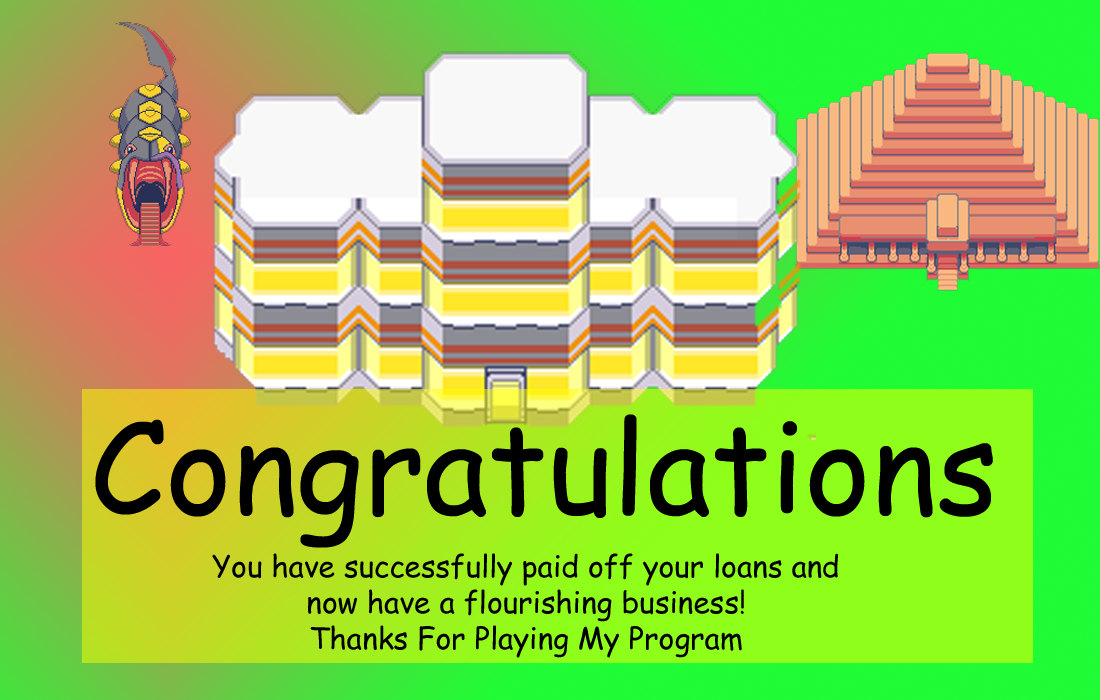
<style>
.page{position:relative;width:1100px;height:700px}
.page>*{position:absolute;margin:0}
.t1{font:125.3px "ComicSansMS";color:#000000}
.t2{font:29.9px "ComicSansMS";color:#000000}
</style>
<div class="page">
<p class="t1" style="left:95px;top:414px;width:898px;height:134px">Congratulations</p>
<p class="t2" style="left:212px;top:553px;width:626px;height:105px;text-align:center">You have successfully paid off your loans and<br>now have a flourishing business!<br>Thanks For Playing My Program</p>
</div>
